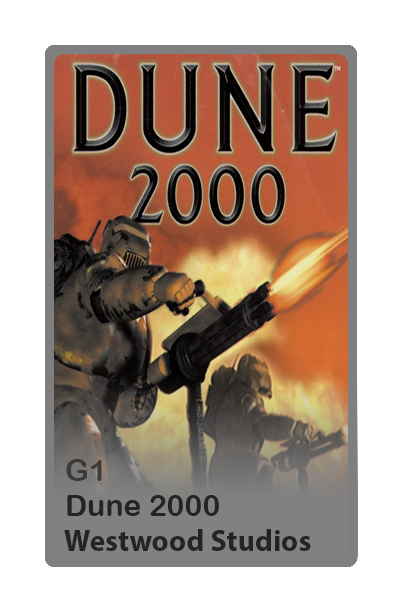
<style>
.page{position:relative;width:402px;height:603px;background:#ffffff}
.page>*{position:absolute;margin:0}
.t1{font:30px "ArialRoundedMTBold";color:#3a3a3a}
.t2{font:30px "ArialRoundedMTBold";color:#242424}
.t3{font:30px "MyriadPro-Bold";color:#242424}
</style>
<div class="page">
<p class="t1" style="left:66px;top:459px;width:36px;height:22px">G1</p>
<p class="t2" style="left:67px;top:495px;width:152px;height:21px">Dune 2000</p>
<p class="t3" style="left:64px;top:529px;width:247px;height:22px">Westwood Studios</p>
</div>
